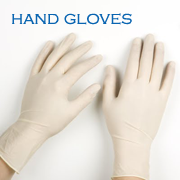
<style>
.page{position:relative;width:180px;height:180px}
.page>*{position:absolute;margin:0}
.t1{font:18px "CopperplateGothic-Light";color:#0a65b1}
</style>
<div class="page">
<p class="t1" style="left:12px;top:13px;width:120px;height:12px">hand gloves</p>
</div>
